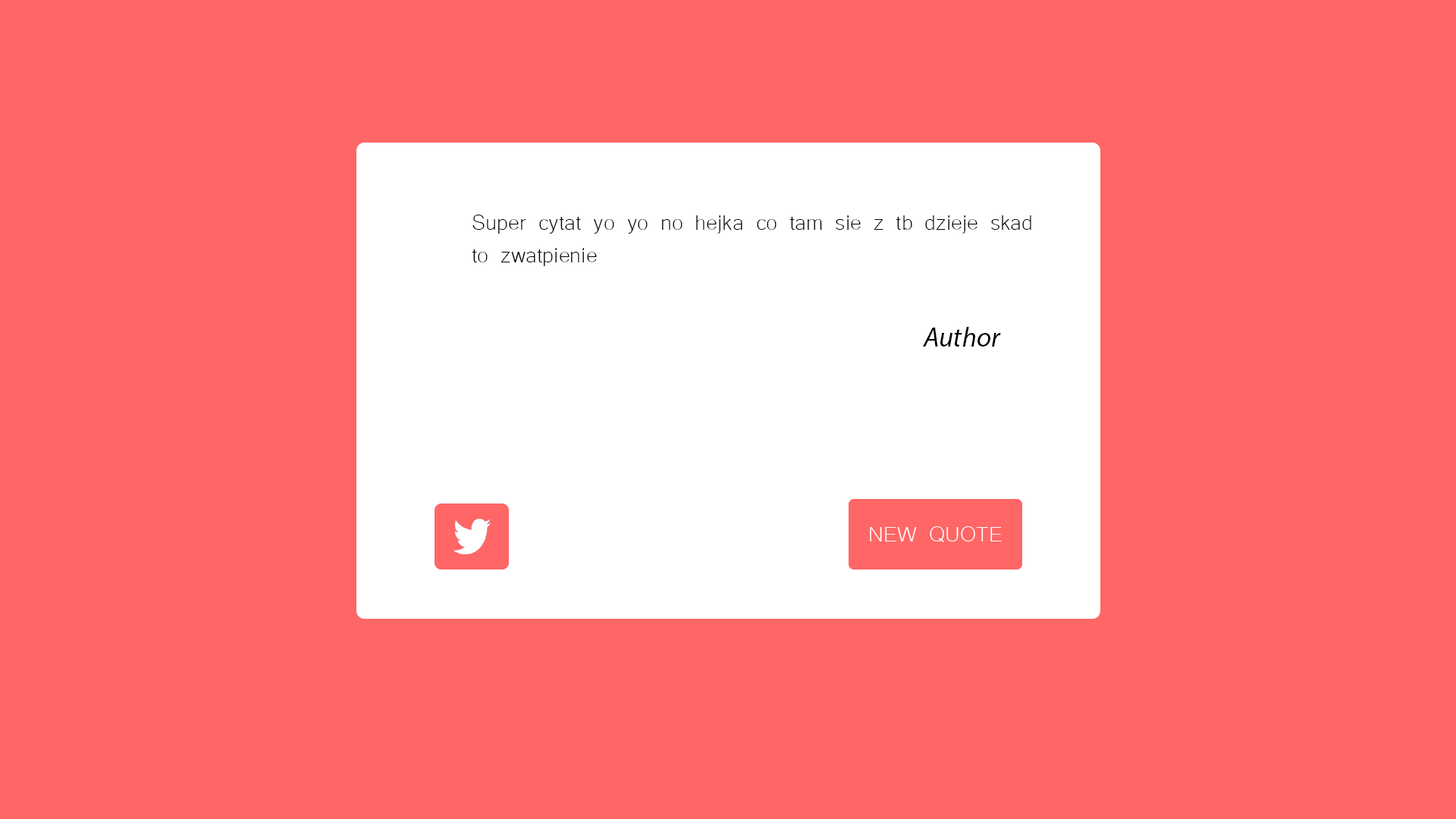
<style>
.page{position:relative;width:1456px;height:819px;background:#ff6666}
.page>*{position:absolute;margin:0}
.t1{font:27.3px "Microsoft-Yi-Baiti";color:#000000}
.t2{font:27.3px "MyriadPro-It";color:#000000}
.t3{font:27.3px "Microsoft-Yi-Baiti";color:#ffffff}
</style>
<div class="page">
<p class="t1" style="left:472px;top:215px;width:559px;height:51px">Super cytat yo yo no hejka co tam sie z tb dzieje skad<br>to zwatpienie</p>
<p class="t2" style="left:923px;top:327px;width:78px;height:20px">Author</p>
<p class="t3" style="left:870px;top:526px;width:132px;height:16px">NEW QUOTE</p>
</div>
